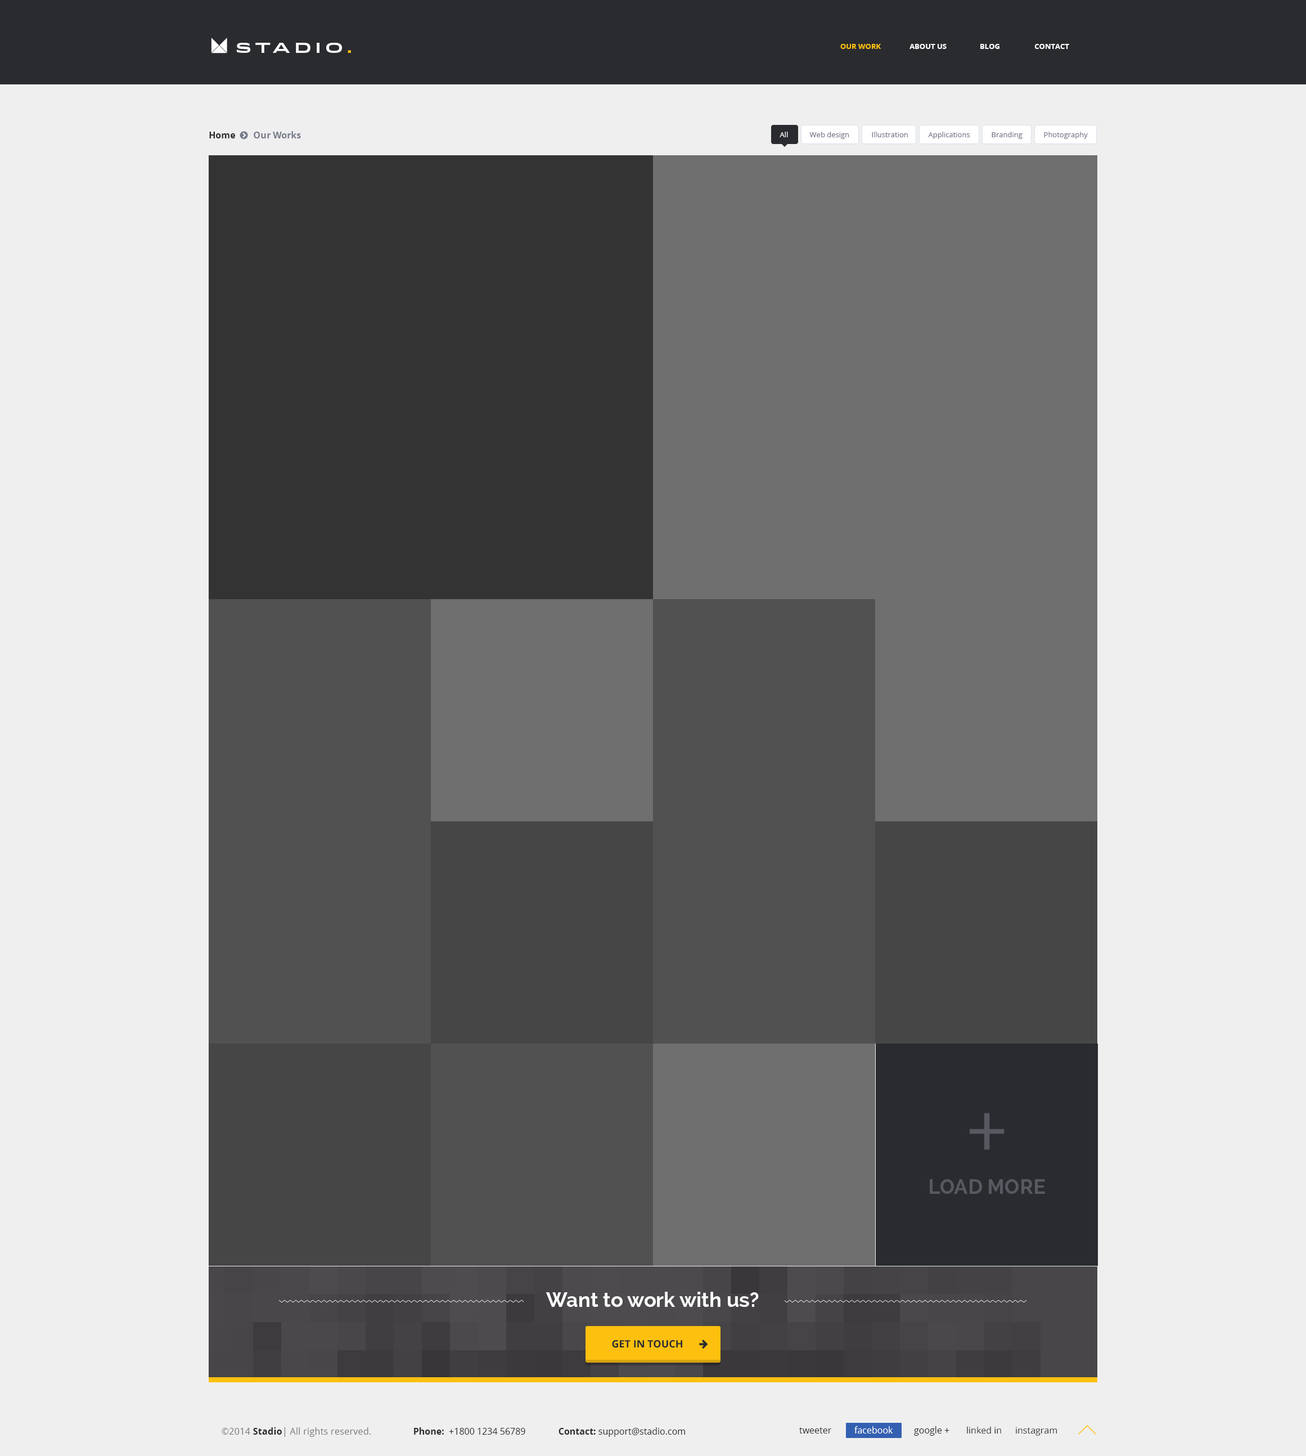
<style>
.page{position:relative;width:1306px;height:1456px;background:#efefef}
.page>*{position:absolute;margin:0}
.t1{font:13.5px "Idlewild-Bold";letter-spacing:0.3em;color:#ffffff;text-transform:uppercase}
.t2{font:13.5px "Idlewild-Bold";letter-spacing:0.3em;color:#fdc00f;text-transform:uppercase}
.t3{font:7.3px "OpenSans-Bold";color:#fdc00f;text-transform:uppercase}
.t4{font:7.3px "OpenSans-Bold";color:#ffffff;text-transform:uppercase}
.t5{font:9px "OpenSans-Bold";color:#757989}
.t6{font:9px "OpenSans-Bold";color:#2a2b2f}
.t7{font:7.3px "OpenSans";color:#ffffff}
.t8{font:7.3px "OpenSans";color:#757989}
.t9{font:20.2px "Raleway-Bold";color:#575960}
.t10{font:20.2px "Raleway-Bold";color:#ffffff}
.t11{font:10.1px "OpenSans-Bold";color:#2a2b2f;text-transform:uppercase}
.t12{font:9px "OpenSans";letter-spacing:0.02em;color:#787878}
.t13{font:9px "OpenSans-Bold";letter-spacing:0.02em;color:#222222}
.t14{font:9px "OpenSans";color:#2a2b2f}
.t15{font:9px "OpenSans";color:#ffffff}
</style>
<div class="page">
<p class="t1" style="left:237px;top:43px;width:114px;height:10px">stAdio<span class="t2">.</span></p>
<p class="t3" style="left:840px;top:44px;width:41px;height:5px">our work</p>
<p class="t4" style="left:910px;top:44px;width:37px;height:5px">About us</p>
<p class="t4" style="left:980px;top:44px;width:20px;height:5px">BLOG</p>
<p class="t4" style="left:1034px;top:44px;width:35px;height:5px">Contact</p>
<p class="t5" style="left:209px;top:131px;width:92px;height:7px"><span class="t6">Home        </span>Our Works</p>
<p class="t7" style="left:780px;top:132px;width:8px;height:5px">All</p>
<p class="t8" style="left:809px;top:132px;width:40px;height:7px">Web design</p>
<p class="t8" style="left:872px;top:132px;width:36px;height:5px">Illustration</p>
<p class="t8" style="left:928px;top:132px;width:42px;height:7px">Applications</p>
<p class="t8" style="left:992px;top:132px;width:31px;height:7px">Branding</p>
<p class="t8" style="left:1044px;top:132px;width:44px;height:7px">Photography</p>
<p class="t9" style="left:930px;top:1179px;width:115px;height:15px">LOAD MORE</p>
<p class="t10" style="left:546px;top:1291px;width:213px;height:16px">Want to work with us?</p>
<p class="t11" style="left:612px;top:1340px;width:70px;height:8px">GET IN TOUCH</p>
<p class="t12" style="left:222px;top:1427px;width:149px;height:10px">©2014 <span class="t13">Stadio</span>| All rights reserved.</p>
<p class="t14" style="left:414px;top:1427px;width:271px;height:10px"><span class="t6">Phone:</span>  +1800 1234 56789              <span class="t6">Contact:</span> support@stadio.com</p>
<p class="t14" style="left:799px;top:1427px;width:32px;height:6px">tweeter</p>
<p class="t15" style="left:854px;top:1426px;width:39px;height:7px">facebook</p>
<p class="t14" style="left:914px;top:1426px;width:35px;height:9px">google +</p>
<p class="t14" style="left:967px;top:1426px;width:34px;height:8px">linked in</p>
<p class="t14" style="left:1016px;top:1426px;width:41px;height:9px">instagram</p>
</div>
